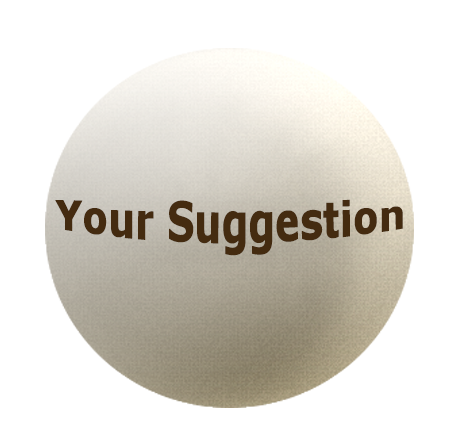
<style>
.page{position:relative;width:459px;height:435px;background:#ffffff}
.page>*{position:absolute;margin:0}
.t1{font:38px "Verdana-Bold";color:#442b10}
</style>
<div class="page">
<p class="t1" style="left:55px;top:199px;width:348px;height:57px">Your Suggestion</p>
</div>
